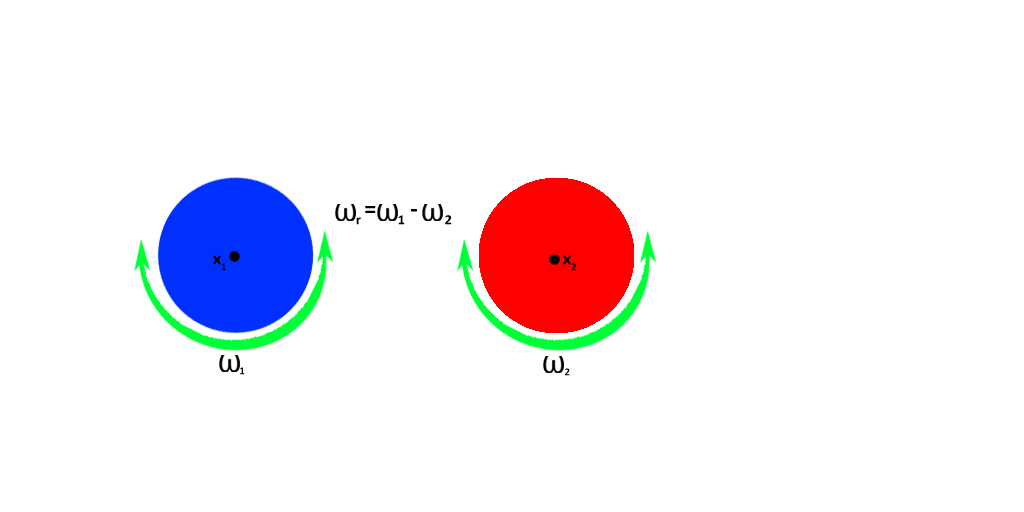
<style>
.page{position:relative;width:1024px;height:512px;background:#ffffff}
.page>*{position:absolute;margin:0}
.t1{font:24px "Calibri-Bold";color:#000000}
.t2{font:18px "Calibri-Bold";color:#000000}
</style>
<div class="page">
<p class="t1" style="left:356px;top:206px;width:96px;height:19px">r =    1 -     2</p>
<p class="t2" style="left:213px;top:255px;width:13px;height:16px">x1</p>
<p class="t2" style="left:563px;top:255px;width:13px;height:16px">x2</p>
<p class="t2" style="left:240px;top:367px;width:5px;height:8px">1</p>
<p class="t2" style="left:565px;top:368px;width:5px;height:8px">2</p>
</div>
